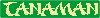
<style>
.page{position:relative;width:100px;height:18px;background:#029834}
.page>*{position:absolute;margin:0}
.t1{font:19.6px "SevenSwordsmenBB";color:#eeefa3}
</style>
<div class="page">
<p class="t1" style="left:3px;top:2px;width:95px;height:14px">TAnaman</p>
</div>
